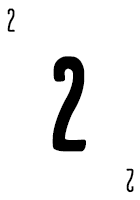
<style>
.page{position:relative;width:140px;height:200px;background:#ffffff}
.page>*{position:absolute;margin:0}
.t1{font:28.7px "CardenioModern-Reg";letter-spacing:-0.1em;color:#000000;text-transform:uppercase;font-weight:bold;scale:0.87 1}
.t2{font:115px "CardenioModern-Bold";letter-spacing:-0.1em;color:#000000;text-transform:uppercase;font-weight:bold;scale:0.87 1}
</style>
<div class="page">
<p class="t1" style="left:7px;top:8px;width:8px;height:24px">2</p>
<p class="t2" style="left:52px;top:56px;width:34px;height:96px">2</p>
<p class="t1" style="left:126px;top:168px;width:8px;height:25px;rotate:180deg">2</p>
</div>
